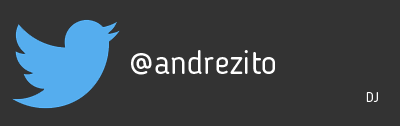
<style>
.page{position:relative;width:400px;height:126px;background:#333333}
.page>*{position:absolute;margin:0}
.t1{font:33.1px "BloggerSans";color:#ffffff}
.t2{font:14px "BloggerSans-Light";color:#ffffff}
</style>
<div class="page">
<p class="t1" style="left:131px;top:50px;width:144px;height:25px">@andrezito</p>
<p class="t2" style="left:366px;top:92px;width:12px;height:10px">DJ</p>
</div>
